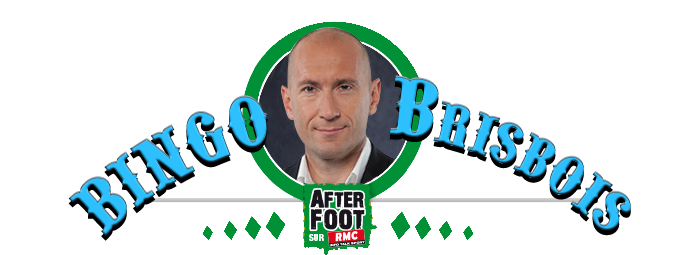
<style>
.page{position:relative;width:700px;height:255px;background:#ffffff}
.page>*{position:absolute;margin:0}
.t1{font:75.6px "PointedlyMad";color:#2cc0ff;font-variant:small-caps}
.t2{font:85.6px "PointedlyMad";color:#2cc0ff;font-variant:small-caps}
</style>
<div class="page">
<p class="t1" style="left:68px;top:75px;width:563px;height:161px">BINGO   b <span class="t2">Brisbois</span></p>
</div>
